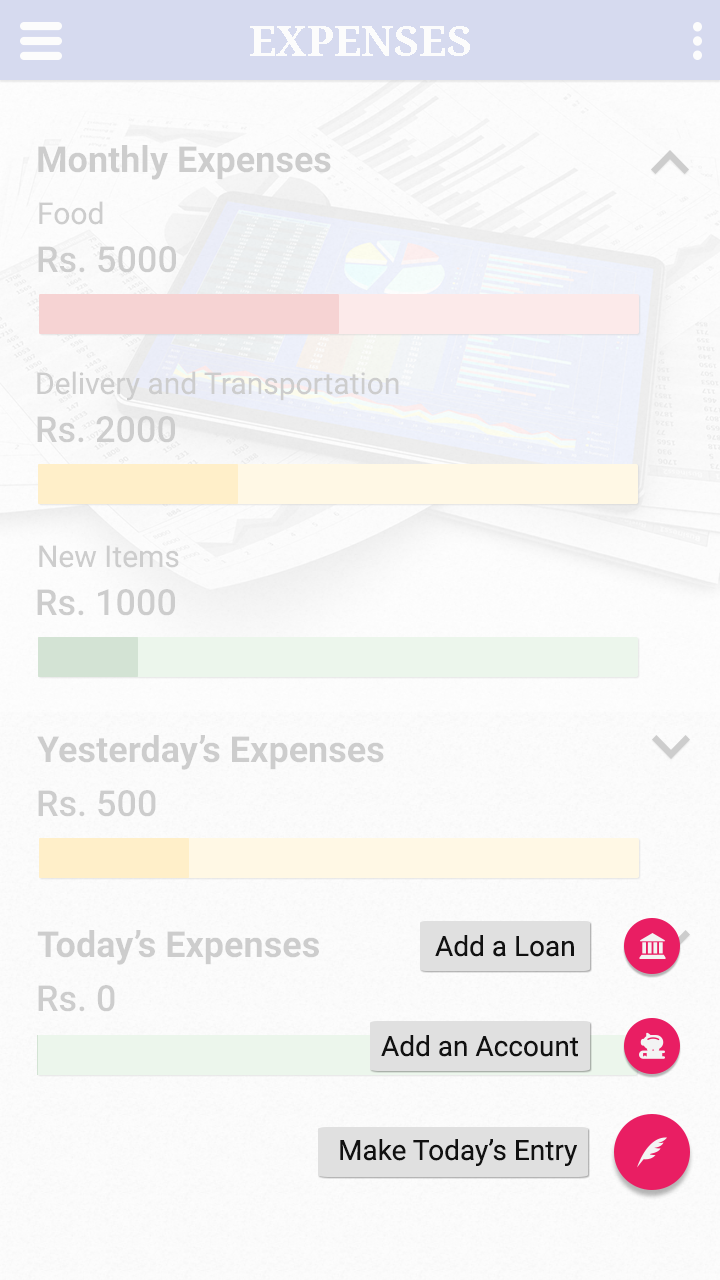
<style>
.page{position:relative;width:720px;height:1280px}
.page>*{position:absolute;margin:0}
.t1{font:42px "NotoSerif-Bold";color:#f3f3f3}
.t2{font:36px "Roboto-Bold";color:#cdcdcd}
.t3{font:30px "Roboto-Regular";color:#cdcdcd}
.t4{font:36px "Roboto-Medium";color:#cdcdcd}
.t5{font:28px "Roboto-Regular";color:#111111}
</style>
<div class="page">
<p class="t1" style="left:250px;top:26px;width:220px;height:30px">EXPENSES</p>
<p class="t2" style="left:38px;top:145px;width:293px;height:35px">Monthly Expenses</p>
<p class="t3" style="left:39px;top:201px;width:64px;height:24px">Food</p>
<p class="t4" style="left:38px;top:246px;width:138px;height:27px">Rs. 5000</p>
<p class="t3" style="left:37px;top:371px;width:362px;height:30px">Delivery and Transportation</p>
<p class="t4" style="left:37px;top:416px;width:138px;height:27px">Rs. 2000</p>
<p class="t3" style="left:39px;top:545px;width:140px;height:23px">New Items</p>
<p class="t4" style="left:37px;top:589px;width:138px;height:27px">Rs. 1000</p>
<p class="t2" style="left:37px;top:735px;width:347px;height:35px">Yesterday’s Expenses</p>
<p class="t4" style="left:38px;top:790px;width:118px;height:27px">Rs. 500</p>
<p class="t2" style="left:37px;top:930px;width:282px;height:35px">Today’s Expenses</p>
<p class="t5" style="left:435px;top:935px;width:139px;height:22px">Add a Loan</p>
<p class="t4" style="left:38px;top:985px;width:77px;height:27px">Rs. 0</p>
<p class="t5" style="left:381px;top:1035px;width:197px;height:22px">Add an Account</p>
<p class="t5" style="left:340px;top:1139px;width:237px;height:27px">Make Today’s Entry</p>
</div>
